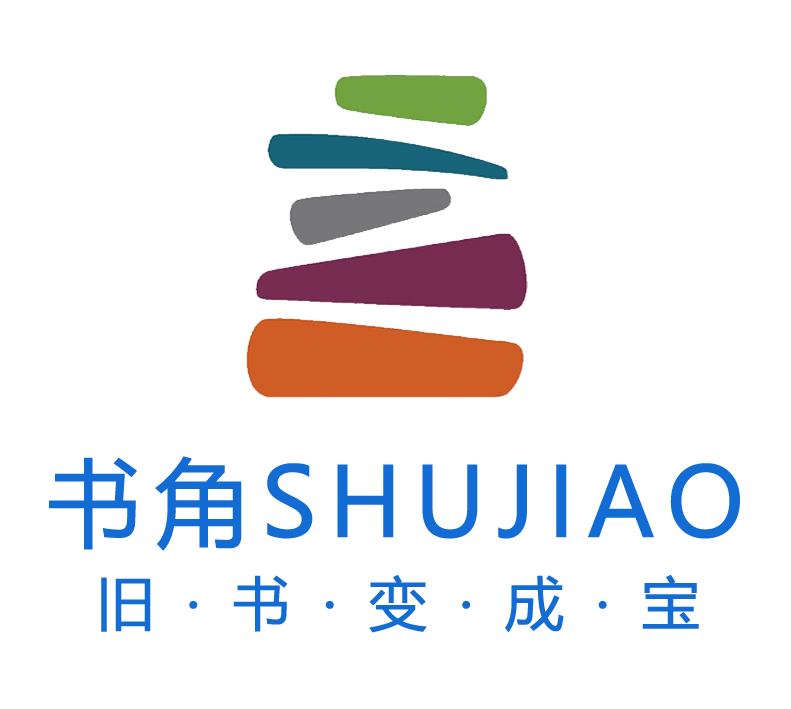
<style>
.page{position:relative;width:791px;height:709px;background:#ffffff}
.page>*{position:absolute;margin:0}
.t1{font:95.3px "MicrosoftYaHei";letter-spacing:0.1em;color:#136cd4;font-weight:bold}
.t2{font:58.3px "MicrosoftYaHei";letter-spacing:0.1em;color:#136cd4;font-weight:bold}
</style>
<div class="page">
<p class="t1" style="left:49px;top:456px;width:691px;height:95px">书角SHUJIAO</p>
<p class="t2" style="left:101px;top:575px;width:598px;height:58px">旧 · 书 · 变 · 成 · 宝</p>
</div>
